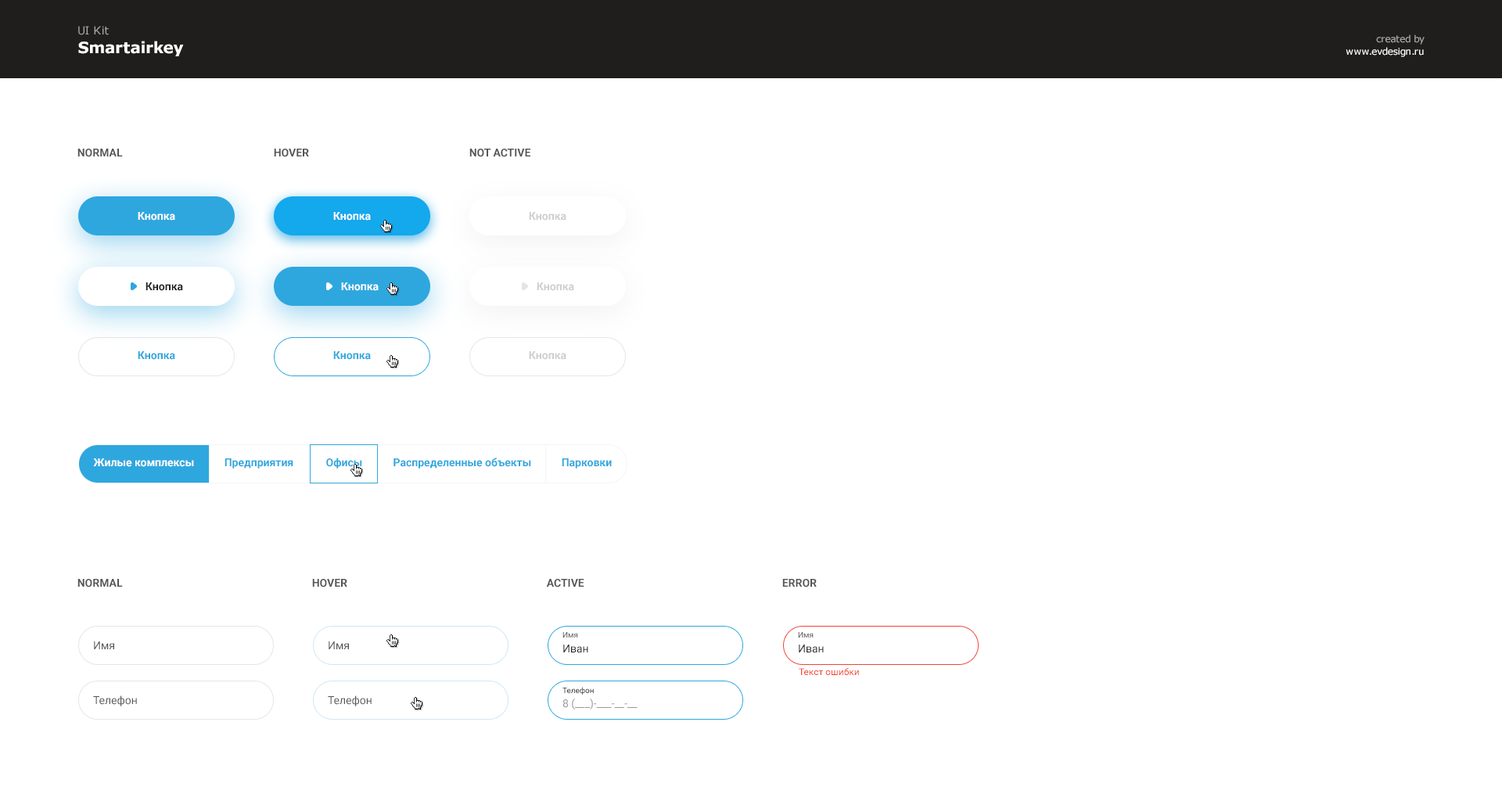
<style>
.page{position:relative;width:1502px;height:794px;background:#ffffff}
.page>*{position:absolute;margin:0}
.t1{font:11px "Verdana";color:#a9a9a8}
.t2{font:15.6px "Verdana-Bold";color:#ffffff}
.t3{font:9.4px "Verdana";color:#a9a9a8}
.t4{font:9.4px "Verdana";color:#ffffff}
.t5{font:11px "Roboto-Bold";color:#555555;text-transform:uppercase}
.t6{font:11px "Roboto-Bold";color:#ffffff}
.t7{font:11px "Roboto-Bold";color:#cecece}
.t8{font:11px "Roboto-Bold";color:#222222}
.t9{font:11px "Roboto-Bold";color:#2ea7df}
.t10{font:11px "Roboto-Regular";color:#555555}
.t11{font:7.8px "Roboto-Regular";color:#555555}
.t12{font:11px "Roboto-Regular";color:#222222}
.t13{font:9.4px "Roboto-Regular";color:#f44336}
.t14{font:7.8px "Roboto-Regular";color:#222222}
.t15{font:11px "Roboto-Regular";color:#999999}
</style>
<div class="page">
<p class="t1" style="left:78px;top:26px;width:31px;height:9px">UI Kit</p>
<p class="t2" style="left:78px;top:41px;width:106px;height:15px">Smartairkey</p>
<p class="t3" style="left:1376px;top:34px;width:48px;height:11px">created by</p>
<p class="t4" style="left:1345px;top:47px;width:79px;height:10px">www.evdesign.ru</p>
<p class="t5" style="left:77px;top:149px;width:46px;height:8px">Normal</p>
<p class="t5" style="left:274px;top:149px;width:35px;height:8px">Hover</p>
<p class="t5" style="left:469px;top:149px;width:61px;height:8px">Not active</p>
<p class="t6" style="left:138px;top:212px;width:37px;height:9px">Кнопка</p>
<p class="t6" style="left:333px;top:212px;width:38px;height:9px">Кнопка</p>
<p class="t7" style="left:529px;top:212px;width:37px;height:9px">Кнопка</p>
<p class="t8" style="left:145px;top:282px;width:38px;height:9px">Кнопка</p>
<p class="t6" style="left:341px;top:282px;width:38px;height:9px">Кнопка</p>
<p class="t7" style="left:537px;top:282px;width:37px;height:9px">Кнопка</p>
<p class="t9" style="left:138px;top:351px;width:37px;height:9px">Кнопка</p>
<p class="t9" style="left:333px;top:351px;width:38px;height:9px">Кнопка</p>
<p class="t7" style="left:529px;top:351px;width:37px;height:9px">Кнопка</p>
<p class="t6" style="left:93px;top:458px;width:101px;height:9px">Жилые комплексы</p>
<p class="t9" style="left:224px;top:458px;width:69px;height:11px">Предприятия</p>
<p class="t9" style="left:326px;top:458px;width:36px;height:11px">Офисы</p>
<p class="t9" style="left:393px;top:458px;width:138px;height:11px">Распределенные объекты</p>
<p class="t9" style="left:562px;top:458px;width:50px;height:11px">Парковки</p>
<p class="t5" style="left:77px;top:579px;width:46px;height:8px">Normal</p>
<p class="t5" style="left:312px;top:579px;width:35px;height:8px">Hover</p>
<p class="t5" style="left:546px;top:579px;width:38px;height:8px">Active</p>
<p class="t5" style="left:782px;top:579px;width:35px;height:8px">Error</p>
<p class="t10" style="left:94px;top:641px;width:20px;height:8px">Имя</p>
<p class="t10" style="left:329px;top:641px;width:20px;height:8px">Имя</p>
<p class="t11" style="left:562px;top:632px;width:16px;height:6px">Имя</p>
<p class="t11" style="left:798px;top:632px;width:16px;height:6px">Имя</p>
<p class="t12" style="left:563px;top:645px;width:25px;height:8px">Иван</p>
<p class="t12" style="left:799px;top:645px;width:25px;height:8px">Иван</p>
<p class="t13" style="left:799px;top:667px;width:60px;height:8px">Текст ошибки</p>
<p class="t14" style="left:562px;top:687px;width:32px;height:8px">Телефон</p>
<p class="t10" style="left:93px;top:695px;width:44px;height:11px">Телефон</p>
<p class="t10" style="left:328px;top:695px;width:44px;height:11px">Телефон</p>
<p class="t15" style="left:562px;top:698px;width:76px;height:12px">8 (___)-___-__-__</p>
</div>
